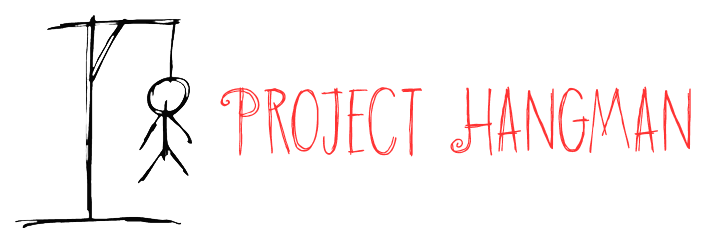
<style>
.page{position:relative;width:706px;height:243px;background:#ffffff}
.page>*{position:absolute;margin:0}
.t1{font:80.7px "DKHangmansDelight";color:#ff3333;scale:1.08 1}
</style>
<div class="page">
<p class="t1" style="left:220px;top:86px;width:471px;height:71px">Project Hangman</p>
</div>
